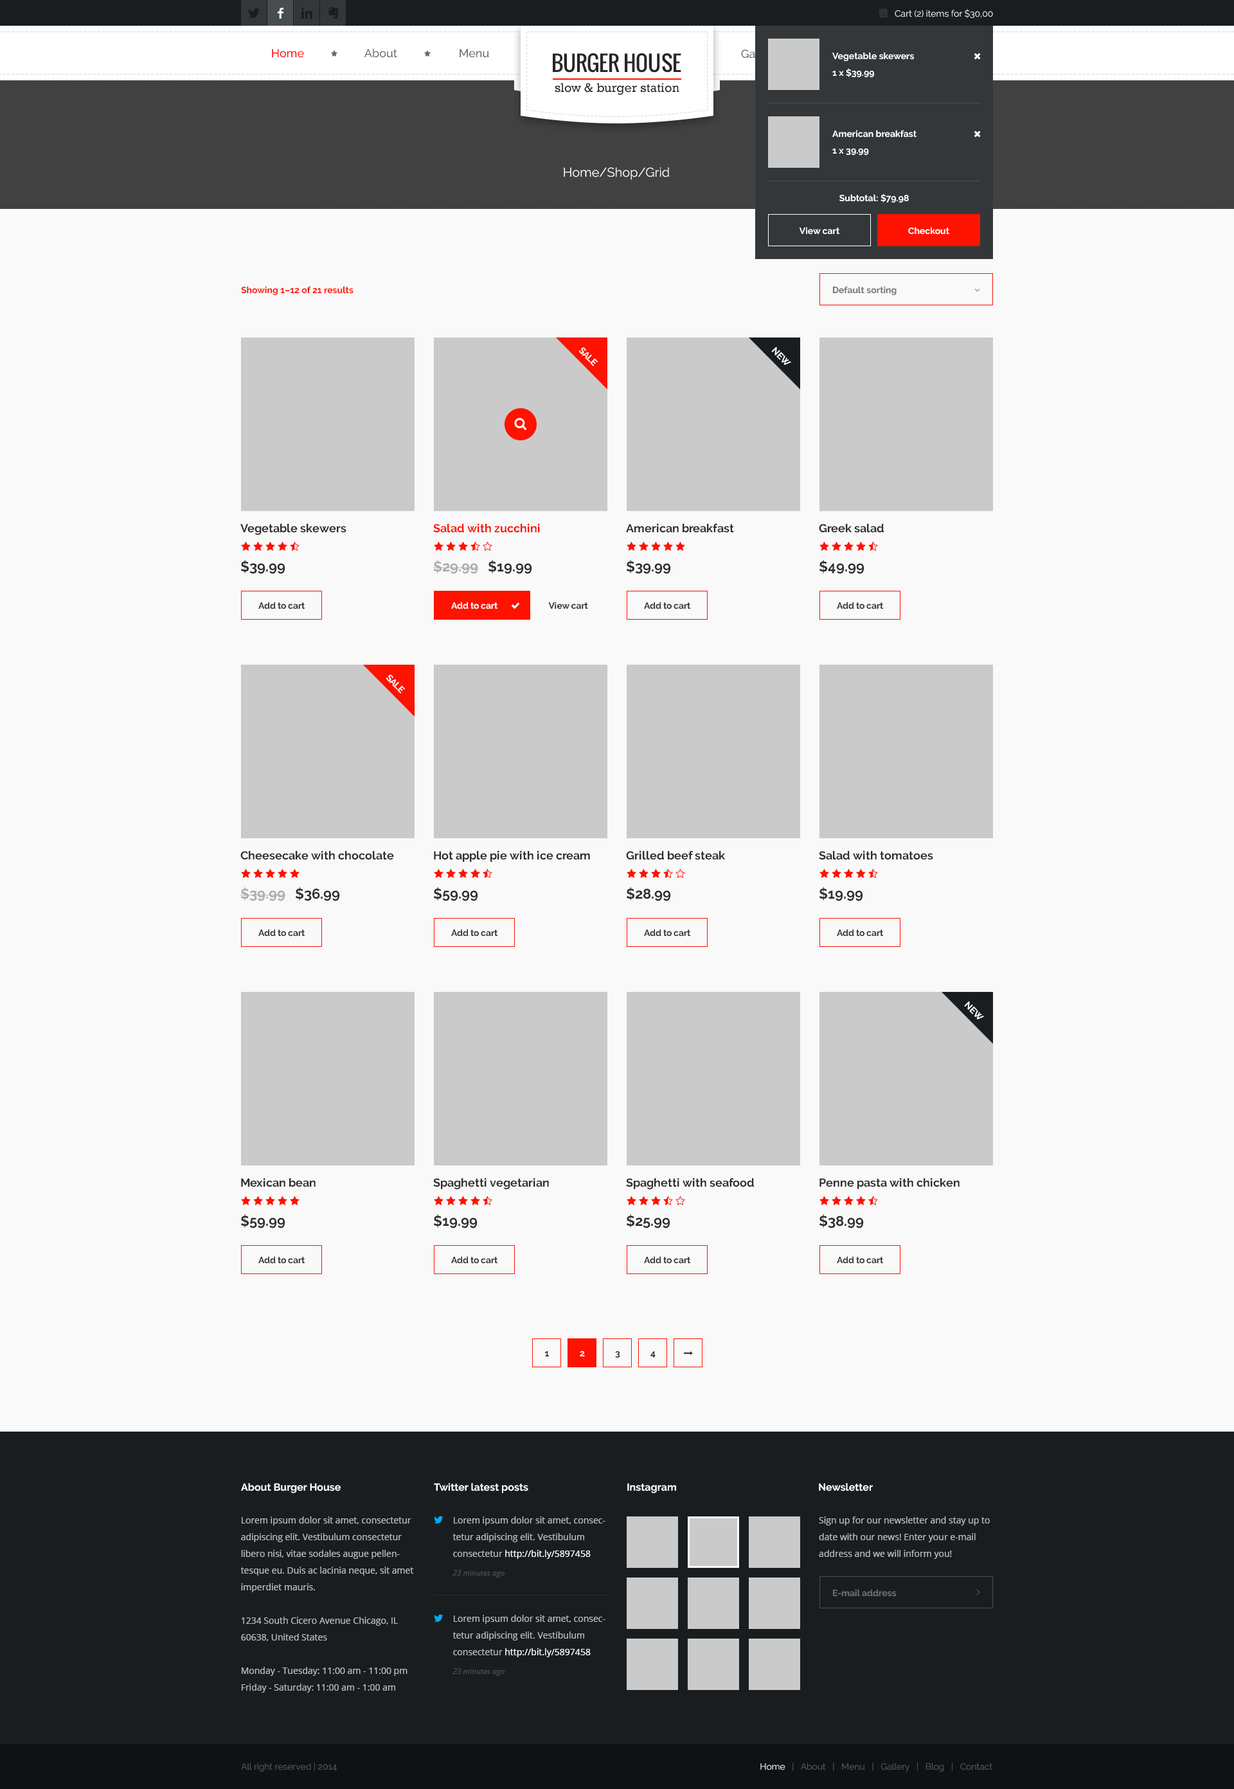
<style>
.page{position:relative;width:1234px;height:1789px;background:#f9f9f9}
.page>*{position:absolute;margin:0}
.t1{font:9px "Raleway-Regular";color:#ffffff}
.t2{font:11.6px "Raleway-Medium";color:#fe0000}
.t3{font:11.6px "Raleway-Medium";color:#726666}
.t4{font:21.2px "Oswald";color:#2a2525}
.t5{font:9px/16.7px "Raleway-Bold";color:#ffffff}
.t6{font:12.9px "Rockwell";color:#2a2525}
.t7{font:12.9px "Raleway-Regular";color:#ffffff}
.t8{font:9px "Raleway-Bold";color:#ffffff}
.t9{font:9px "Raleway-Bold";color:#ff1200}
.t10{font:9px "Raleway-Bold";color:#767070}
.t11{font:11.6px "Raleway-Bold";color:#322d2d}
.t12{font:11.6px "Raleway-Bold";color:#ff1200}
.t13{font:14.1px "Raleway-Bold";color:#322d2d}
.t14{font:14.1px "Raleway-Bold";color:#acacac}
.t15{font:9px "Raleway-Bold";color:#322d2d}
.t16{font:9px "Raleway-Bold";color:#f9f9f9}
.t17{font:10.3px "Raleway-Bold";color:#fefefe}
.t18{font:9px/16.7px "OpenSans";color:#bdbcbc}
.t19{font:9px/16.7px "OpenSans";color:#ffffff}
.t20{font:7.7px "OpenSans-Italic";color:#494e51}
.t21{font:9px "Raleway-Bold";color:#6a6f72}
.t22{font:9px "Raleway";color:#5d6062}
.t23{font:9px "Raleway";color:#ffffff}
</style>
<div class="page">
<p class="t1" style="left:895px;top:9px;width:98px;height:9px">Cart (2) items for $30,00</p>
<p class="t2" style="left:272px;top:49px;width:32px;height:9px">Home</p>
<p class="t3" style="left:364px;top:48px;width:33px;height:10px">About</p>
<p class="t3" style="left:460px;top:49px;width:29px;height:9px">Menu</p>
<p class="t4" style="left:553px;top:53px;width:128px;height:20px">BURGER HOUSE</p>
<p class="t5" style="left:832px;top:52px;width:82px;height:26px">Vegetable skewers<br>1 x $39.99</p>
<p class="t6" style="left:555px;top:83px;width:124px;height:12px">slow &amp; burger station</p>
<p class="t5" style="left:832px;top:130px;width:85px;height:26px">American breakfast<br>1 x 39.99</p>
<p class="t7" style="left:564px;top:167px;width:105px;height:13px">Home/Shop/Grid</p>
<p class="t8" style="left:840px;top:193px;width:69px;height:10px">Subtotal: $79.98</p>
<p class="t8" style="left:799px;top:227px;width:41px;height:8px">View cart</p>
<p class="t8" style="left:908px;top:227px;width:41px;height:8px">Checkout</p>
<p class="t9" style="left:241px;top:286px;width:113px;height:9px">Showing 1–12 of 21 results</p>
<p class="t10" style="left:833px;top:286px;width:64px;height:9px">Default sorting</p>
<p class="t8" style="left:579px;top:347px;width:19px;height:19px;rotate:45deg">SALE</p>
<p class="t8" style="left:771px;top:346px;width:20px;height:19px;rotate:45deg">NEW</p>
<p class="t11" style="left:240px;top:523px;width:106px;height:12px">Vegetable skewers</p>
<p class="t12" style="left:433px;top:523px;width:107px;height:10px">Salad with zucchini</p>
<p class="t11" style="left:626px;top:523px;width:108px;height:10px">American breakfast</p>
<p class="t11" style="left:819px;top:523px;width:65px;height:10px">Greek salad</p>
<p class="t13" style="left:240px;top:560px;width:45px;height:14px">$39.99</p>
<p class="t14" style="left:433px;top:560px;width:99px;height:14px">$29.99   <span class="t13">$19.99</span></p>
<p class="t13" style="left:626px;top:560px;width:45px;height:14px">$39.99</p>
<p class="t13" style="left:819px;top:560px;width:46px;height:14px">$49.99</p>
<p class="t15" style="left:258px;top:602px;width:47px;height:7px">Add to cart</p>
<p class="t16" style="left:451px;top:602px;width:47px;height:7px">Add to cart</p>
<p class="t15" style="left:548px;top:602px;width:40px;height:7px">View cart</p>
<p class="t15" style="left:644px;top:602px;width:47px;height:7px">Add to cart</p>
<p class="t15" style="left:837px;top:602px;width:47px;height:7px">Add to cart</p>
<p class="t8" style="left:386px;top:674px;width:20px;height:20px;rotate:45deg">SALE</p>
<p class="t11" style="left:240px;top:850px;width:154px;height:10px">Cheesecake with chocolate</p>
<p class="t11" style="left:434px;top:850px;width:156px;height:12px">Hot apple pie with ice cream</p>
<p class="t11" style="left:626px;top:850px;width:99px;height:10px">Grilled beef steak</p>
<p class="t11" style="left:819px;top:850px;width:114px;height:10px">Salad with tomatoes</p>
<p class="t14" style="left:240px;top:887px;width:100px;height:14px">$39.99<span class="t13">   $36.99</span></p>
<p class="t13" style="left:433px;top:887px;width:45px;height:14px">$59.99</p>
<p class="t13" style="left:626px;top:887px;width:45px;height:14px">$28.99</p>
<p class="t13" style="left:819px;top:887px;width:44px;height:14px">$19.99</p>
<p class="t15" style="left:258px;top:929px;width:47px;height:8px">Add to cart</p>
<p class="t15" style="left:451px;top:929px;width:47px;height:8px">Add to cart</p>
<p class="t15" style="left:644px;top:929px;width:47px;height:8px">Add to cart</p>
<p class="t15" style="left:837px;top:929px;width:47px;height:8px">Add to cart</p>
<p class="t8" style="left:964px;top:1001px;width:20px;height:19px;rotate:45deg">NEW</p>
<p class="t11" style="left:241px;top:1178px;width:75px;height:9px">Mexican bean</p>
<p class="t11" style="left:433px;top:1178px;width:116px;height:11px">Spaghetti vegetarian</p>
<p class="t11" style="left:626px;top:1178px;width:128px;height:11px">Spaghetti with seafood</p>
<p class="t11" style="left:820px;top:1178px;width:140px;height:11px">Penne pasta with chicken</p>
<p class="t13" style="left:240px;top:1214px;width:45px;height:14px">$59.99</p>
<p class="t13" style="left:433px;top:1214px;width:45px;height:14px">$19.99</p>
<p class="t13" style="left:626px;top:1214px;width:44px;height:14px">$25.99</p>
<p class="t13" style="left:819px;top:1214px;width:45px;height:14px">$38.99</p>
<p class="t15" style="left:258px;top:1256px;width:47px;height:8px">Add to cart</p>
<p class="t15" style="left:451px;top:1256px;width:47px;height:8px">Add to cart</p>
<p class="t15" style="left:644px;top:1256px;width:47px;height:8px">Add to cart</p>
<p class="t15" style="left:837px;top:1256px;width:47px;height:8px">Add to cart</p>
<p class="t15" style="left:545px;top:1351px;width:4px;height:5px">1</p>
<p class="t8" style="left:580px;top:1351px;width:5px;height:5px">2</p>
<p class="t15" style="left:615px;top:1351px;width:5px;height:7px">3</p>
<p class="t15" style="left:651px;top:1351px;width:5px;height:7px">4</p>
<p class="t17" style="left:241px;top:1483px;width:100px;height:10px">About Burger House</p>
<p class="t17" style="left:434px;top:1483px;width:94px;height:10px">Twitter latest posts</p>
<p class="t17" style="left:627px;top:1483px;width:49px;height:10px">Instagram</p>
<p class="t17" style="left:819px;top:1483px;width:54px;height:8px">Newsletter</p>
<p class="t18" style="left:240px;top:1516px;width:174px;height:177px">Lorem ipsum dolor sit amet, consectetur adipiscing elit. Vestibulum consectetur libero nisi, vitae sodales augue pellentesque eu. Duis ac lacinia neque, sit amet imperdiet mauris. <br><br>1234 South Cicero Avenue Chicago, IL 60638, United States<br><br>Monday - Tuesday: 11:00 am - 11:00 pm<br>Friday - Saturday: 11:00 am - 1:00 am</p>
<p class="t18" style="left:453px;top:1516px;width:153px;height:43px">Lorem ipsum dolor sit amet, consectetur adipiscing elit. Vestibulum consectetur <span class="t19">http://bit.ly/5897458</span></p>
<p class="t18" style="left:819px;top:1516px;width:171px;height:43px">Sign up for our newsletter and stay up to date with our news! Enter your e-mail address and we will inform you!</p>
<p class="t20" style="left:453px;top:1570px;width:52px;height:8px">23 minutes ago</p>
<p class="t21" style="left:833px;top:1589px;width:63px;height:8px">E-mail address</p>
<p class="t18" style="left:453px;top:1615px;width:153px;height:42px">Lorem ipsum dolor sit amet, consectetur adipiscing elit. Vestibulum consectetur <span class="t19">http://bit.ly/5897458</span></p>
<p class="t20" style="left:453px;top:1668px;width:52px;height:8px">23 minutes ago</p>
<p class="t22" style="left:241px;top:1763px;width:96px;height:9px">All right reserved | 2014</p>
<p class="t22" style="left:760px;top:1763px;width:233px;height:9px"><span class="t23">Home   </span>|   About   |   Menu   |   Gallery   |   Blog   |   Contact</p>
</div>
